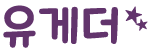
<style>
.page{position:relative;width:150px;height:50px;background:#ffffff}
.page>*{position:absolute;margin:0}
.t1{font:46px "MaplestoryLight";color:#62346c;font-weight:bold}
.t2{font:19.8px "MalgunGothic";color:#62346c;font-weight:bold}
.t3{font:13.6px "MalgunGothic";color:#62346c;font-weight:bold}
</style>
<div class="page">
<p class="t1" style="left:3px;top:5px;width:115px;height:43px">유게더</p>
<p class="t2" style="left:125px;top:6px;width:17px;height:18px;rotate:15deg">★</p>
<p class="t3" style="left:135px;top:18px;width:13px;height:13px;rotate:60deg">★</p>
</div>
